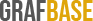
<style>
.page{position:relative;width:93px;height:21px;background:#ffffff}
.page>*{position:absolute;margin:0}
.t1{font:30.5px "BebasNeue-Regular";color:#565656}
.t2{font:30.5px "BebasNeue-Regular";color:#dfa50a}
</style>
<div class="page">
<p class="t1" style="left:0px;top:0px;width:93px;height:21px">Graf<span class="t2">Base</span></p>
</div>
